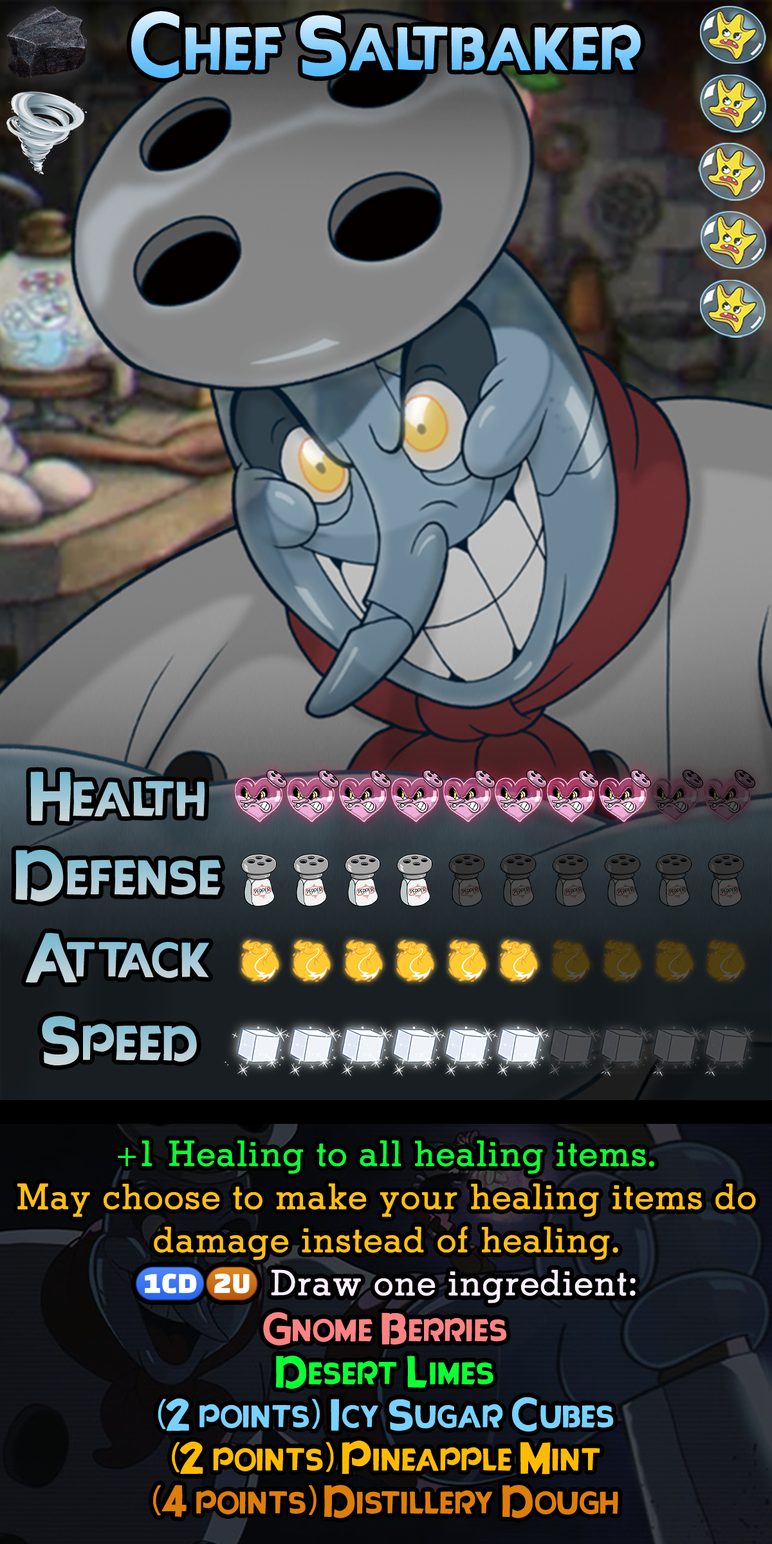
<style>
.page{position:relative;width:772px;height:1544px}
.page>*{position:absolute;margin:0}
.t1{font:115.2px "Chailce-Noggin-Regular"}
.t2{font:92.7px "Chailce-Noggin-Regular"}
.t3{font:59.2px/43.1px "CupheadMemphis-Medium";color:#ffbe12}
.t4{font:59.2px/43.1px "MyriadPro-Regular";color:#0dfb34}
.t5{font:59.2px/43.1px "CupheadMemphis-Medium";color:#0dfb34}
.t6{font:59.2px/43.1px "stoogedings-Regular";color:#f9eeff}
.t7{font:59.2px/43.1px "CupheadMemphis-Medium";color:#f9eeff}
.t8{font:59.2px/43.1px "Chailce-Noggin-Regular";color:#fc8383}
.t9{font:59.2px/43.1px "Chailce-Noggin-Regular";color:#0dff35}
.t10{font:59.2px/43.1px "CupheadMemphis-Medium";color:#78d1ff}
.t11{font:59.2px/43.1px "Chailce-Noggin-Regular";color:#78d1ff}
.t12{font:59.2px/43.1px "CupheadMemphis-Medium";color:#ffbb04}
.t13{font:59.2px/43.1px "Chailce-Noggin-Regular";color:#ffbb04}
.t14{font:59.2px/43.1px "CupheadMemphis-Medium";color:#dd7d0b}
.t15{font:59.2px/43.1px "Chailce-Noggin-Regular";color:#dd7d0b}
</style>
<div class="page">
<p class="t1" style="left:131px;top:11px;width:510px;height:68px">Chef Saltbaker</p>
<p class="t2" style="left:30px;top:772px;width:175px;height:50px">Health</p>
<p class="t2" style="left:15px;top:850px;width:206px;height:52px">Defense</p>
<p class="t2" style="left:25px;top:933px;width:184px;height:50px">Attack</p>
<p class="t2" style="left:42px;top:1016px;width:155px;height:50px">Speed</p>
<p class="t3" style="left:17px;top:1140px;width:739px;height:379px;text-align:center"><span class="t4">+</span><span class="t5">1 Healing to all healing items.<br></span>May choose to make your healing items do damage instead of healing.<br><span class="t6">(1CD)(2U)</span><span class="t7"> Draw one ingredient:<br></span><span class="t8">Gnome Berries<br></span><span class="t9">Desert Limes<br></span><span class="t10">(</span><span class="t11">2 points</span><span class="t10">)</span><span class="t11"> Icy Sugar Cubes<br></span><span class="t12">(</span><span class="t13">2 points</span><span class="t12">)</span><span class="t13"> Pineapple Mint<br></span><span class="t14">(</span><span class="t15">4 points</span><span class="t14">)</span><span class="t15"> Distillery Dough</span></p>
</div>
